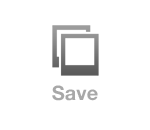
<style>
.page{position:relative;width:150px;height:130px;background:#ffffff}
.page>*{position:absolute;margin:0}
.t1{font:20px "AlteHaasGrotesk_Bold";color:#a8a8a8}
</style>
<div class="page">
<p class="t1" style="left:52px;top:85px;width:46px;height:16px">Save</p>
</div>
